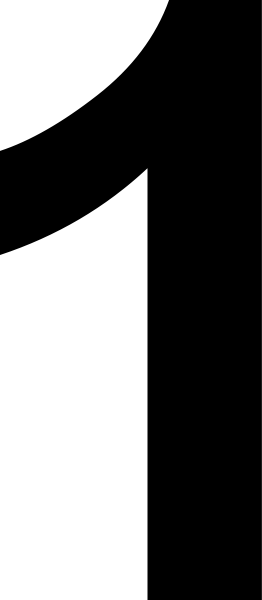
<style>
.page{position:relative;width:262px;height:600px;background:#000000}
.page>*{position:absolute;margin:0}
.t1{font:833.3px "Arial-BoldMT";letter-spacing:0.04em;color:#000000}
</style>
<div class="page">
<p class="t1" style="left:0px;top:0px;width:262px;height:600px">1</p>
</div>
